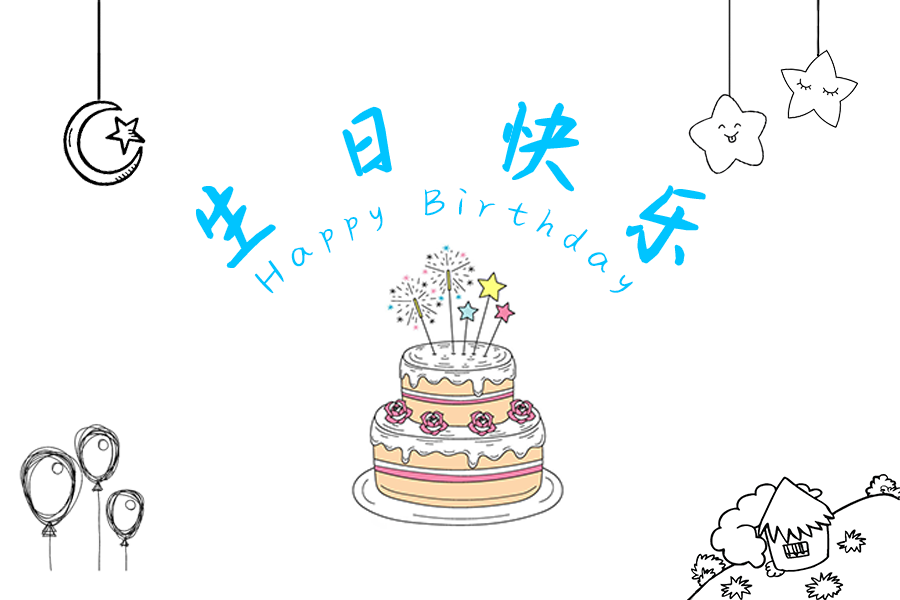
<style>
.page{position:relative;width:900px;height:600px;background:#ffffff}
.page>*{position:absolute;margin:0}
.t1{font:100px "FZSJ-BANCZML";color:#00c4ff}
.t2{font:41.7px "FZSJ-BANCZML";color:#00c4ff}
</style>
<div class="page">
<p class="t1" style="left:343px;top:108px;width:48px;height:67px;rotate:-15deg">日</p>
<p class="t1" style="left:503px;top:103px;width:75px;height:87px;rotate:15deg">快</p>
<p class="t1" style="left:197px;top:187px;width:78px;height:80px;rotate:-35deg">生</p>
<p class="t2" style="left:254px;top:188px;width:379px;height:106px">Happy Birthday</p>
<p class="t1" style="left:627px;top:186px;width:78px;height:78px;rotate:35deg">乐</p>
</div>
